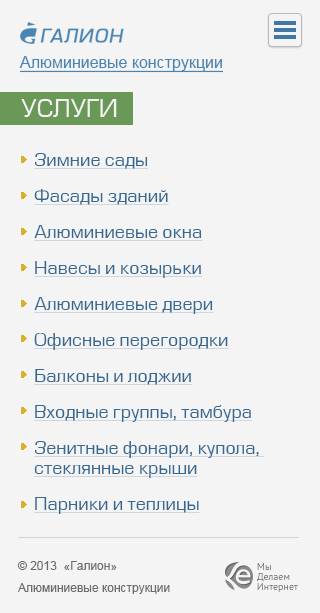
<style>
.page{position:relative;width:320px;height:613px;background:#f4f4f4}
.page>*{position:absolute;margin:0}
.t1{font:16px "ArialMT";color:#4a84b2;text-decoration:underline}
.t2{font:24px "EuropeNormal";color:#f4f4f4;text-transform:uppercase}
.t3{font:18px/36px "EuropeNormal";color:#356892;text-decoration:underline}
.t4{font:18px/20px "EuropeNormal";color:#356892;text-decoration:underline}
.t5{font:12px/22px "ArialMT";color:#6d6d6d}
.t6{font:12px/14px "ArialMT";color:#6d6d6d}
.t7{font:10px/10px "PTSans-Regular";color:#636363}
</style>
<div class="page">
<p class="t1" style="left:19px;top:56px;width:204px;height:17px">Алюминиевые конструкции</p>
<p class="t2" style="left:21px;top:99px;width:96px;height:18px">УСЛУГИ</p>
<p class="t3" style="left:34px;top:153px;width:230px;height:361px">Зимние сады<br>Фасады зданий<br>Алюминиевые окна<br>Навесы и козырьки<br>Алюминиевые двери<br>Офисные перегородки<br>Балконы и лоджии<br>Входные группы, тамбура<br>Зенитные фонари, купола, <br><span class="t4">стеклянные крыши<br></span>Парники и теплицы</p>
<p class="t5" style="left:17px;top:561px;width:153px;height:33px">© 2013  «Галион»<br>Алюминиевые <span class="t6">конструкции</span></p>
<p class="t7" style="left:257px;top:563px;width:41px;height:29px">Мы <br>Делаем<br>Интернет</p>
</div>
